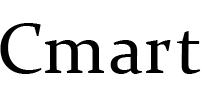
<style>
.page{position:relative;width:202px;height:94px;background:#ffffff}
.page>*{position:absolute;margin:0}
.t1{font:72px "Constantia";letter-spacing:0.05em;color:#000000}
</style>
<div class="page">
<p class="t1" style="left:0px;top:23px;width:42px;height:51px">C</p>
<p class="t1" style="left:45px;top:40px;width:59px;height:33px">m</p>
<p class="t1" style="left:110px;top:40px;width:33px;height:34px">a</p>
<p class="t1" style="left:146px;top:40px;width:25px;height:33px">r</p>
<p class="t1" style="left:177px;top:31px;width:24px;height:43px">t</p>
</div>
